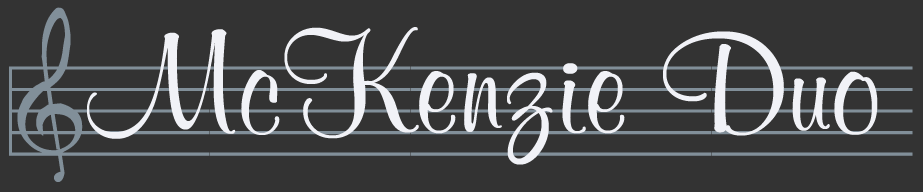
<style>
.page{position:relative;width:923px;height:192px;background:#333333}
.page>*{position:absolute;margin:0}
.t1{font:143.5px "musicfun";color:#818f99}
.t2{font:143.5px "MurrayHillBT-Bold";color:#f1f2f7}
</style>
<div class="page">
<p class="t1" style="left:9px;top:7px;width:904px;height:175px">gssssssss</p>
<p class="t2" style="left:87px;top:27px;width:791px;height:138px">McKenzie Duo</p>
</div>
